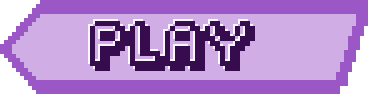
<style>
.page{position:relative;width:368px;height:94px;background:#d0ade4}
.page>*{position:absolute;margin:0}
.t1{font:40px "Fipps-Regular";color:#360c4f}
</style>
<div class="page">
<p class="t1" style="left:88px;top:19px;width:165px;height:50px">PLAY</p>
<p class="t1" style="left:90px;top:21px;width:165px;height:50px">PLAY</p>
</div>
